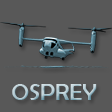
<style>
.page{position:relative;width:112px;height:112px;background:#585858}
.page>*{position:absolute;margin:0}
.t1{font:24px "BerlinSansFB-Reg"}
</style>
<div class="page">
<p class="t1" style="left:12px;top:84px;width:85px;height:16px">OSPREY</p>
</div>
